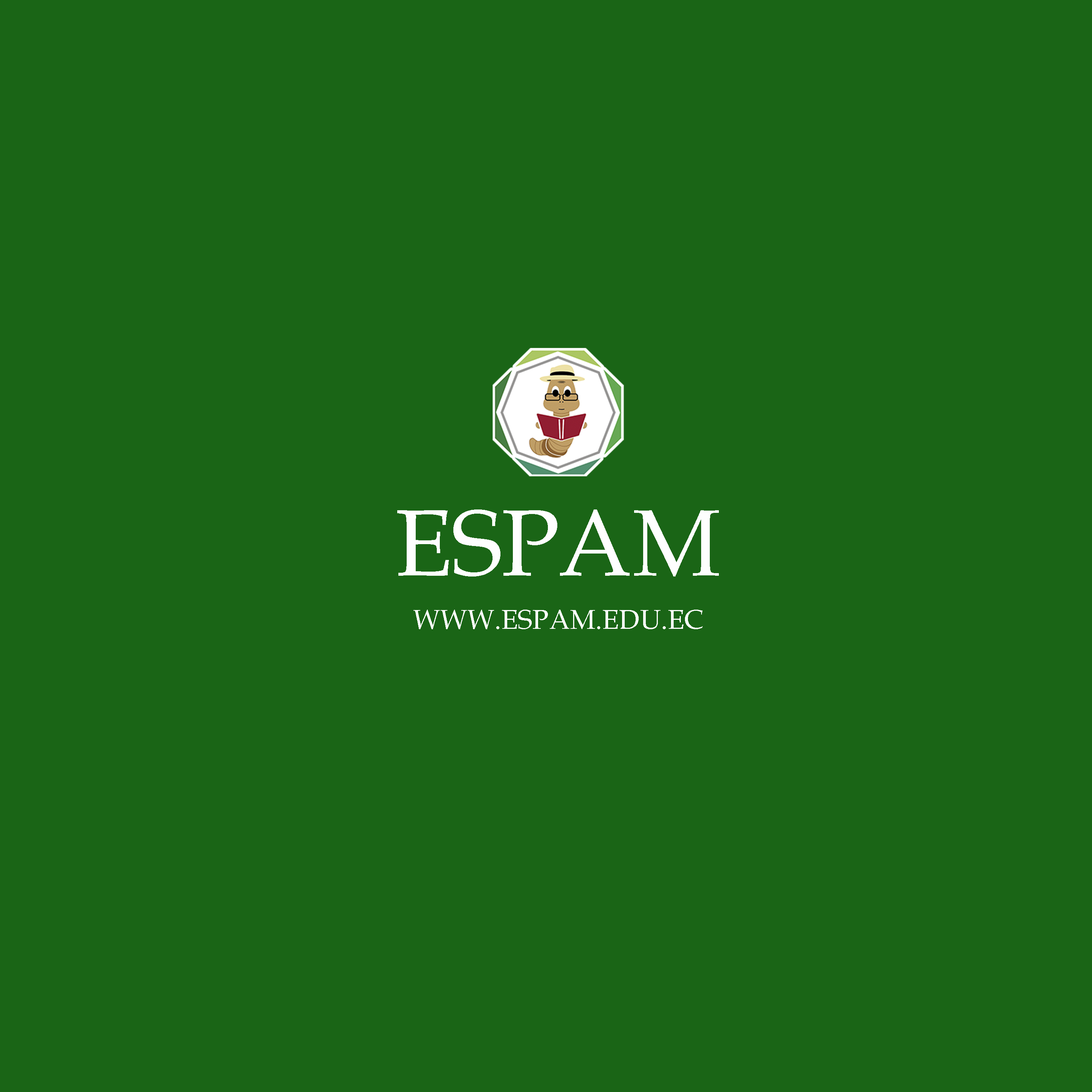
<style>
.page{position:relative;width:1092px;height:1092px;background:#1a6516}
.page>*{position:absolute;margin:0}
.t1{font:94.1px "BookAntiqua";color:#fefefe}
.t2{font:27.1px "BookAntiqua";color:#fefefe}
</style>
<div class="page">
<p class="t1" style="left:397px;top:509px;width:322px;height:67px">ESPAM</p>
<p class="t2" style="left:413px;top:610px;width:290px;height:19px">WWW.ESPAM.EDU.EC</p>
</div>
